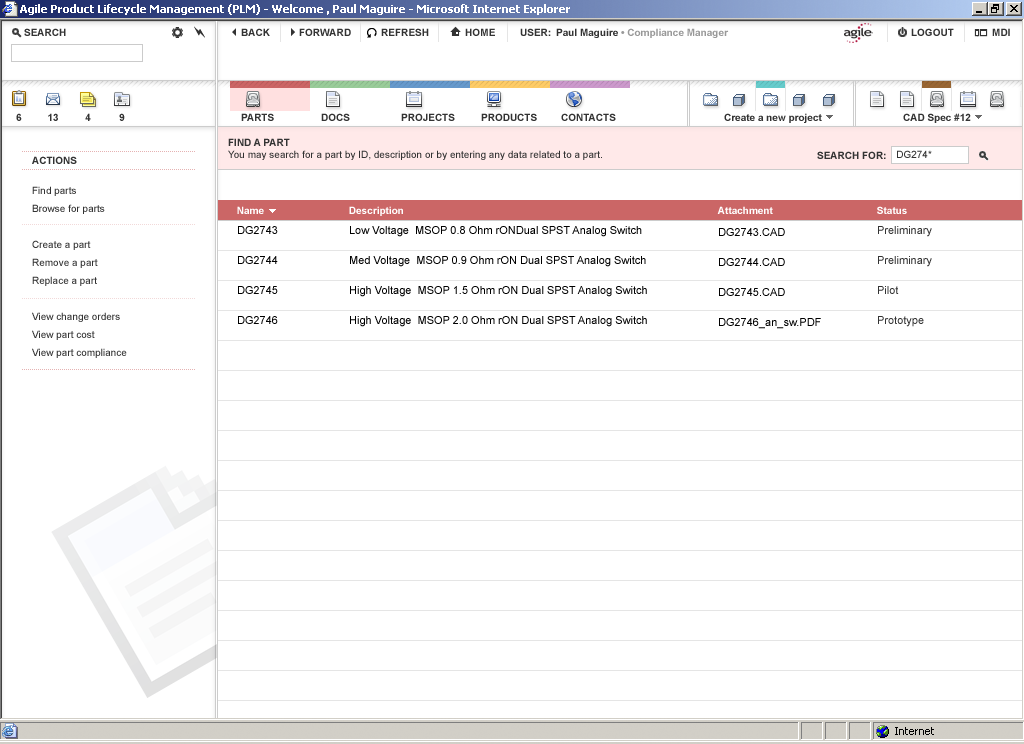
<style>
.page{position:relative;width:1024px;height:744px;background:#ffffff}
.page>*{position:absolute;margin:0}
.t1{font:10px/12px "ArialMT";color:#333333}
.t2{font:10px/12px "Arial-BoldMT";color:#333333}
.t3{font:10px "ArialMT";color:#333333}
.t4{font:10px "Arial-BoldMT";color:#333333}
.t5{font:10px/18px "ArialMT";color:#333333}
.t6{font:10px "Arial-BoldMT";color:#ffffff}
.t7{font:11px/10px "ArialMT";color:#000000}
.t8{font:11px/10px "ArialMT";color:#333333}
</style>
<div class="page">
<p class="t1" style="left:228px;top:138px;width:374px;height:22px"><span class="t2">FIND A PART<br></span>You may search for a part by ID, description or by entering any data related to a part.</p>
<p class="t3" style="left:897px;top:150px;width:35px;height:8px">DG274*</p>
<p class="t4" style="left:32px;top:156px;width:45px;height:8px">ACTIONS</p>
<p class="t4" style="left:817px;top:151px;width:69px;height:8px">SEARCH FOR:</p>
<p class="t5" style="left:32px;top:186px;width:95px;height:172px">Find parts<br>Browse for parts<br><br>Create a part<br>Remove a part<br>Replace a part<br><br>View change orders<br>View part cost<br>View part compliance</p>
<p class="t6" style="left:237px;top:206px;width:27px;height:8px">Name</p>
<p class="t6" style="left:349px;top:206px;width:54px;height:10px">Description</p>
<p class="t6" style="left:717px;top:206px;width:56px;height:8px">Attachment</p>
<p class="t6" style="left:877px;top:206px;width:30px;height:8px">Status</p>
<p class="t7" style="left:238px;top:226px;width:40px;height:98px">DG2743<br><br><br>DG2744<br><br><br>DG2745<br><br><br>DG2746</p>
<p class="t7" style="left:350px;top:226px;width:297px;height:101px">Low Voltage  MSOP 0.8 Ohm rONDual SPST Analog Switch<br><br><br>Med Voltage  MSOP 0.9 Ohm rON Dual SPST Analog Switch<br><br><br>High Voltage  MSOP 1.5 Ohm rON Dual SPST Analog Switch<br><br><br>High Voltage  MSOP 2.0 Ohm rON Dual SPST Analog Switch</p>
<p class="t7" style="left:719px;top:228px;width:102px;height:101px">DG2743.CAD<br><br><br>DG2744.CAD<br><br><br>DG2745.CAD<br><br><br>DG2746_an_sw.PDF</p>
<p class="t8" style="left:878px;top:226px;width:54px;height:101px">Preliminary<br><br><br>Preliminary<br><br><br>Pilot<br><br><br>Prototype</p>
</div>
